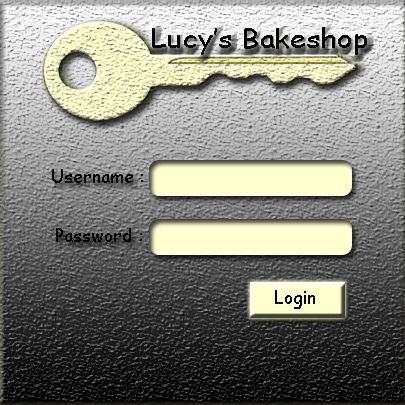
<style>
.page{position:relative;width:405px;height:405px}
.page>*{position:absolute;margin:0}
.t1{font:25.9px "ComicSansMS";color:#000000;scale:1.12 1}
.t2{font:17.5px "ComicSansMS";color:#000000}
</style>
<div class="page">
<p class="t1" style="left:152px;top:27px;width:215px;height:28px">Lucy’s Bakeshop</p>
<p class="t2" style="left:52px;top:169px;width:91px;height:14px">Username :</p>
<p class="t2" style="left:56px;top:228px;width:86px;height:14px">Password :</p>
<p class="t2" style="left:275px;top:290px;width:40px;height:19px">Login</p>
</div>
